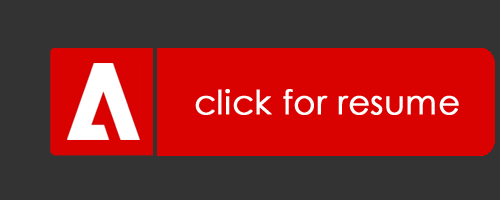
<style>
.page{position:relative;width:500px;height:200px;background:#333333}
.page>*{position:absolute;margin:0}
.t1{font:33.3px "CenturyGothic";color:#ffffff;font-weight:bold}
</style>
<div class="page">
<p class="t1" style="left:195px;top:89px;width:264px;height:26px">click for resume</p>
</div>
